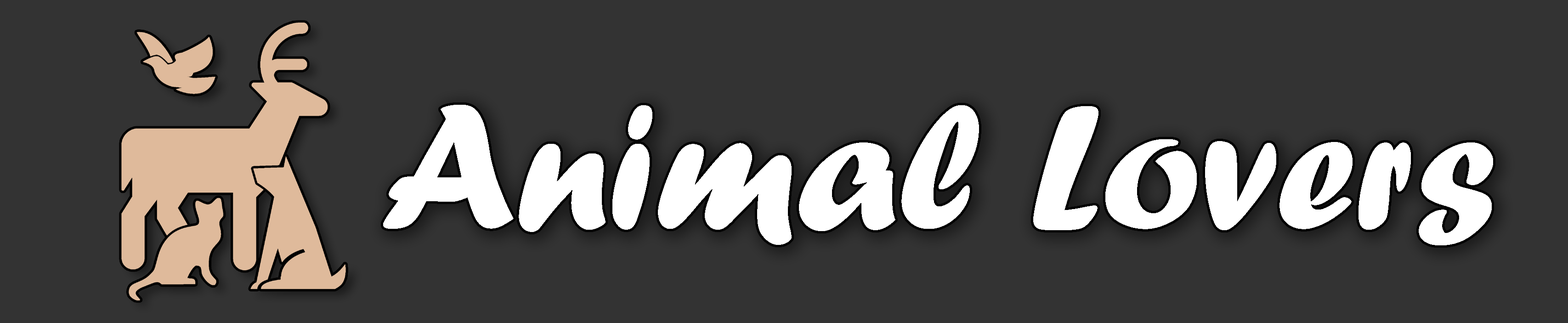
<style>
.page{position:relative;width:1568px;height:323px;background:#333333}
.page>*{position:absolute;margin:0}
.t1{font:183.8px "ForteMT";color:#ffffff}
</style>
<div class="page">
<p class="t1" style="left:383px;top:105px;width:1110px;height:140px">Animal Lovers</p>
</div>
